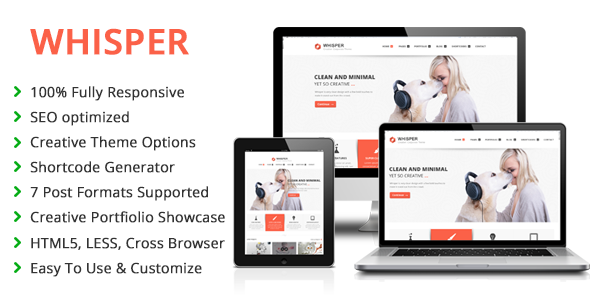
<style>
.page{position:relative;width:590px;height:300px;background:#ffffff}
.page>*{position:absolute;margin:0}
.t1{font:35px "OpenSans-Semibold";color:#fb6148;font-weight:bold}
.t2{font:14px "OpenSans";color:#333333;font-weight:bold}
</style>
<div class="page">
<p class="t1" style="left:30px;top:28px;width:159px;height:27px">WHISPER</p>
<p class="t2" style="left:30px;top:86px;width:195px;height:191px">100% Fully Responsive<br>SEO optimized<br>Creative Theme Options<br>Shortcode Generator<br>7 Post Formats Supported<br>Creative Portfiolio Showcase<br>HTML5, LESS, Cross Browser<br>Easy To Use &amp; Customize</p>
</div>
